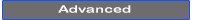
<style>
.page{position:relative;width:224px;height:20px;background:#6e6c6c}
.page>*{position:absolute;margin:0}
.t1{font:10.2px "ArialRoundedMTBold";color:#fcfcfc;scale:1.47 1}
</style>
<div class="page">
<p class="t1" style="left:58px;top:5px;width:73px;height:8px">Advanced</p>
</div>
